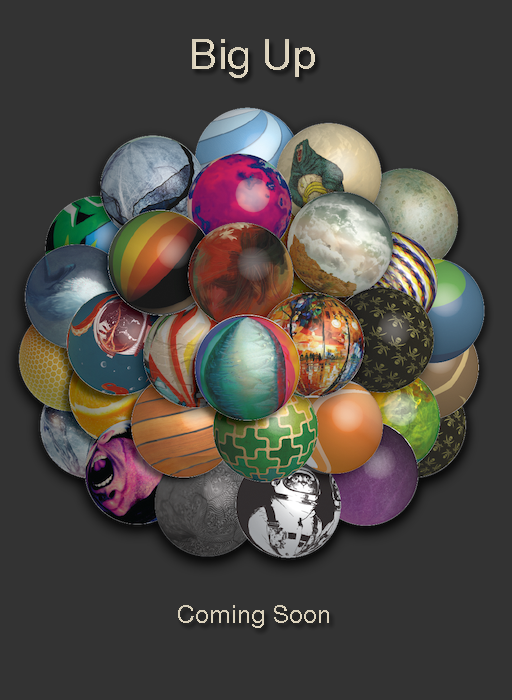
<style>
.page{position:relative;width:512px;height:700px;background:#333333}
.page>*{position:absolute;margin:0}
.t1{font:41.7px "HelveticaNeue";color:#f1e7cf}
.t2{font:25px "HelveticaNeue";color:#d9d0bb}
</style>
<div class="page">
<p class="t1" style="left:192px;top:39px;width:123px;height:39px">Big Up</p>
<p class="t2" style="left:178px;top:605px;width:151px;height:23px">Coming Soon</p>
</div>
